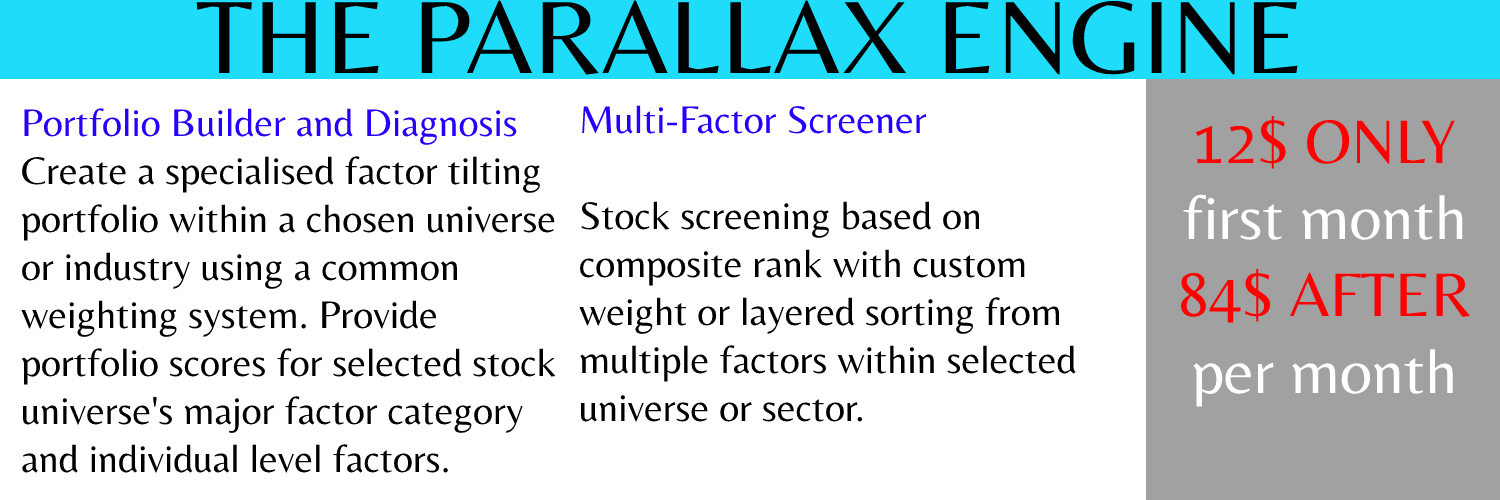
<style>
.page{position:relative;width:1500px;height:500px;background:#ffffff}
.page>*{position:absolute;margin:0}
.t1{font:107px "Belleza-Regular";color:#000000}
.t2{font:40px "Belleza-Regular";color:#000000}
.t3{font:40px "Belleza-Regular";color:#2400ff}
.t4{font:64px "Belleza-Regular";color:#ffffff}
.t5{font:64px "Belleza-Regular";color:#ff0000}
</style>
<div class="page">
<p class="t1" style="left:196px;top:0px;width:1102px;height:75px">THE PARALLAX ENGINE</p>
<p class="t2" style="left:21px;top:108px;width:535px;height:365px"><span class="t3"><br>Portfolio Builder and Diagnosis<br></span>Create a specialised factor tilting<br>portfolio within a chosen universe <br>or industry using a common <br>weighting system. Provide <br>portfolio scores for selected stock <br>universe's major factor category <br>and individual level factors.</p>
<p class="t2" style="left:579px;top:105px;width:497px;height:317px"><span class="t3"><br>Multi-Factor Screener<br><br></span>Stock screening based on <br>composite rank with custom <br>weight or layered sorting from <br>multiple factors within selected <br>universe or sector.</p>
<p class="t4" style="left:1181px;top:116px;width:289px;height:291px;text-align:center"><span class="t5"><br>12$ ONLY<br></span>first month<br><span class="t5">84$ AFTER<br></span>per month</p>
</div>
